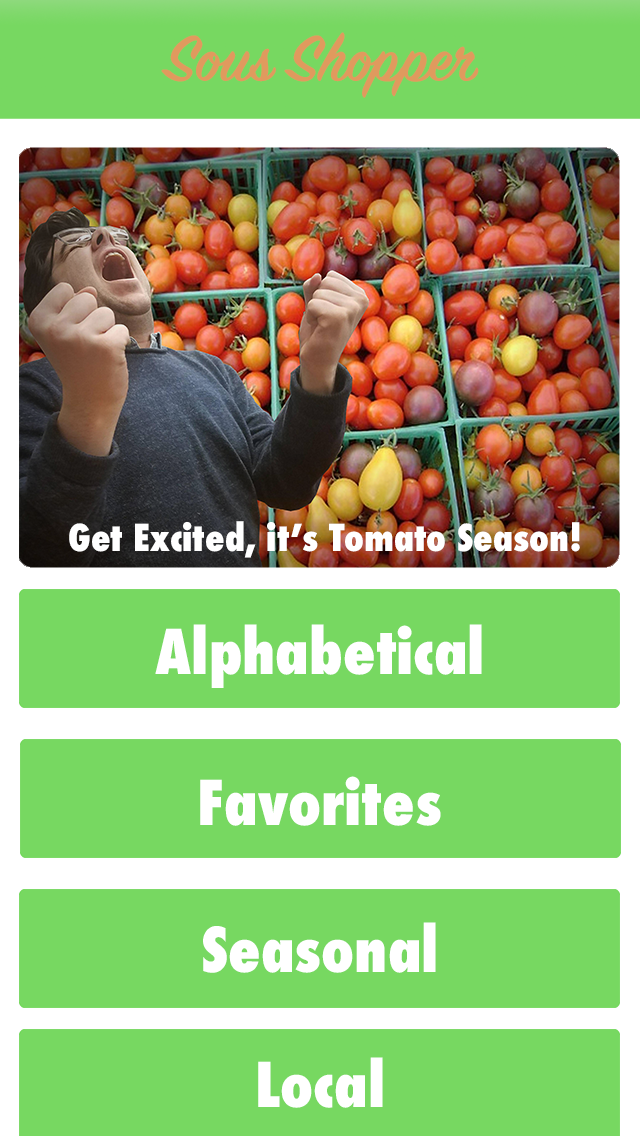
<style>
.page{position:relative;width:640px;height:1136px;background:#77d861}
.page>*{position:absolute;margin:0}
.t1{font:72px "SignPainter-HouseScriptSemibold";color:#e09a5e}
.t2{font:36px "Futura-CondensedExtraBold";color:#ffffff}
.t3{font:60px "Futura-CondensedExtraBold";color:#ffffff}
</style>
<div class="page">
<p class="t1" style="left:161px;top:32px;width:318px;height:66px">Sous Shopper</p>
<p class="t2" style="left:69px;top:521px;width:511px;height:37px">Get Excited, it’s Tomato Season!</p>
<p class="t3" style="left:155px;top:624px;width:327px;height:64px">Alphabetical</p>
<p class="t3" style="left:200px;top:776px;width:241px;height:50px">Favorites</p>
<p class="t3" style="left:203px;top:922px;width:233px;height:51px">Seasonal</p>
<p class="t3" style="left:258px;top:1057px;width:125px;height:51px">Local</p>
</div>
